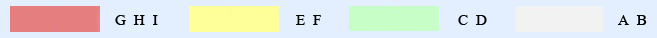
<style>
.page{position:relative;width:657px;height:38px;background:#e3efff}
.page>*{position:absolute;margin:0}
.t1{font:23.3px "AngsanaUPC";color:#010101}
</style>
<div class="page">
<p class="t1" style="left:115px;top:15px;width:43px;height:10px">G  H  I</p>
<p class="t1" style="left:296px;top:15px;width:25px;height:10px">E  F</p>
<p class="t1" style="left:458px;top:15px;width:29px;height:10px">C  D</p>
<p class="t1" style="left:618px;top:15px;width:29px;height:10px">A  B</p>
</div>
